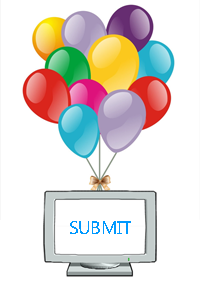
<style>
.page{position:relative;width:200px;height:283px;background:#ffffff}
.page>*{position:absolute;margin:0}
.t1{font:16.6px "MicrosoftYaHei";color:#0099ff}
</style>
<div class="page">
<p class="t1" style="left:70px;top:221px;width:61px;height:13px">SUBMIT</p>
</div>
